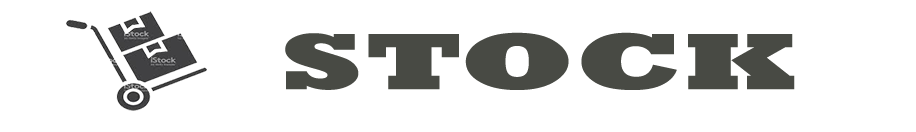
<style>
.page{position:relative;width:916px;height:132px;background:#ffffff}
.page>*{position:absolute;margin:0}
.t1{font:81.1px "Rockwell-ExtraBold";color:#484a44;scale:1.65 1}
</style>
<div class="page">
<p class="t1" style="left:285px;top:32px;width:510px;height:58px">STOCK</p>
</div>
